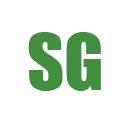
<style>
.page{position:relative;width:128px;height:128px;background:#ffffff}
.page>*{position:absolute;margin:0}
.t1{font:72px "Impact";color:#418e3e}
</style>
<div class="page">
<p class="t1" style="left:28px;top:32px;width:73px;height:59px">SG</p>
</div>
